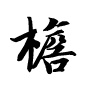
<style>
.page{position:relative;width:88px;height:88px;background:#ffffff}
.page>*{position:absolute;margin:0}
.t1{font:69.1px "Fzikai";color:#000000;font-weight:bold}
</style>
<div class="page">
<p class="t1" style="left:10px;top:16px;width:67px;height:59px">檐</p>
</div>
